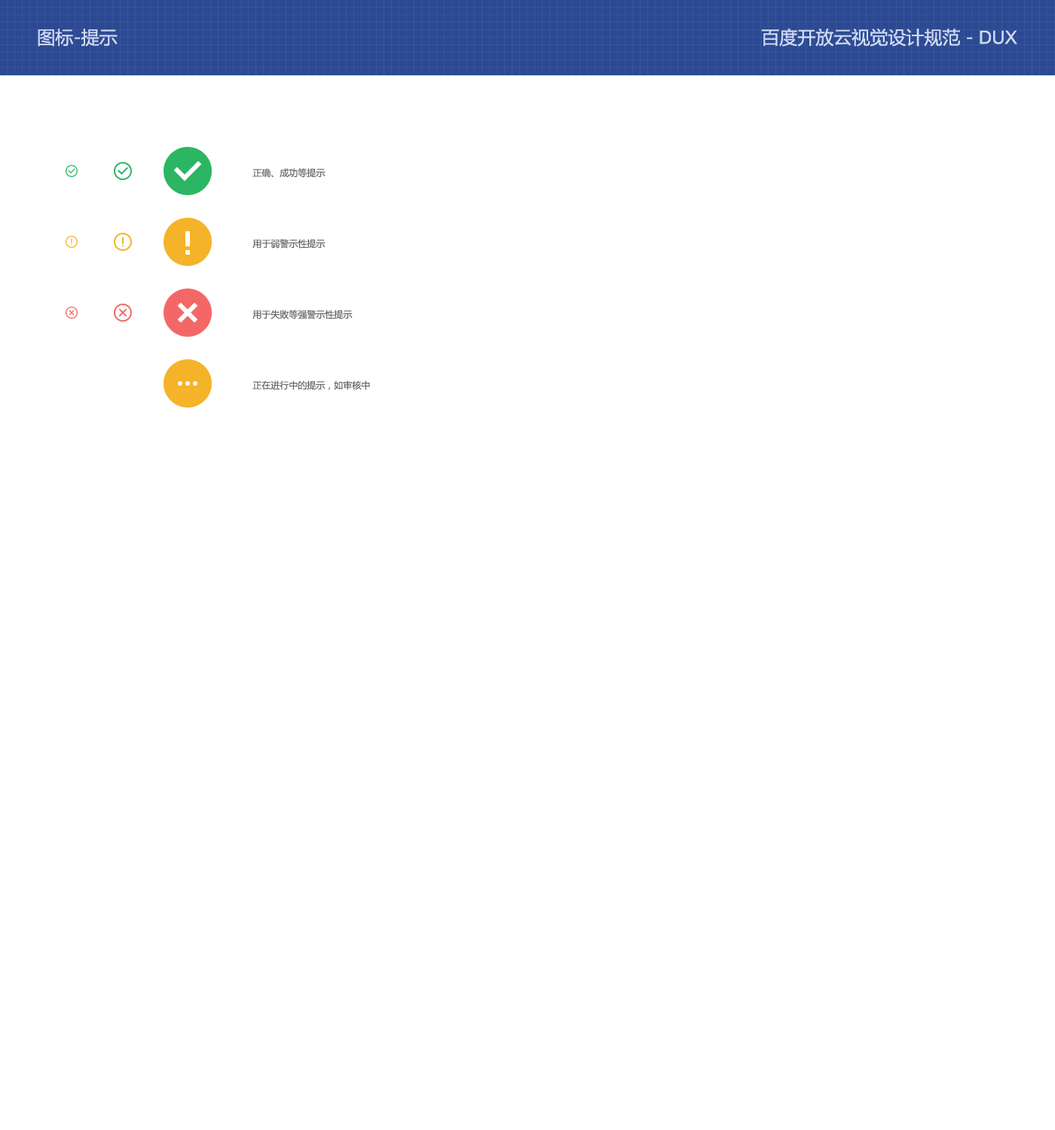
<style>
.page{position:relative;width:1055px;height:1130px;background:#ffffff}
.page>*{position:absolute;margin:0}
.t1{font:18.1px "MicrosoftYaHei";color:#d0daf3}
.t2{font:18.1px "ArialMT";color:#d0daf3}
.t3{font:9px/70.8px "MicrosoftYaHei";color:#666666}
</style>
<div class="page">
<p class="t1" style="left:38px;top:29px;width:80px;height:18px">图标-提示</p>
<p class="t1" style="left:761px;top:28px;width:256px;height:19px">百度开放云视觉设计规范 - <span class="t2">DUX</span></p>
<p class="t3" style="left:252px;top:168px;width:118px;height:222px">正确、成功等提示<br>用于弱警示性提示<br>用于失败等强警示性提示<br>正在进行中的提示，如审核中</p>
</div>
